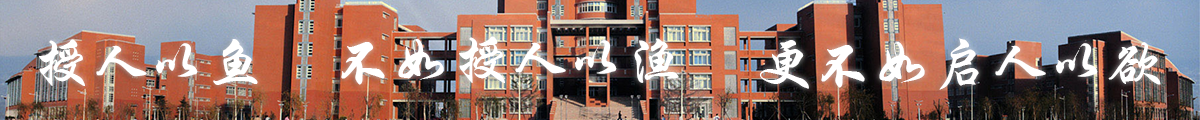
<style>
.page{position:relative;width:1200px;height:120px}
.page>*{position:absolute;margin:0}
.t1{font:58.3px "STXingkai";color:#ffffff}
</style>
<div class="page">
<p class="t1" style="left:39px;top:39px;width:219px;height:47px">授人以鱼</p>
<p class="t1" style="left:341px;top:36px;width:338px;height:49px">不如授人以渔</p>
<p class="t1" style="left:759px;top:38px;width:402px;height:52px">更不如启人以欲</p>
</div>
